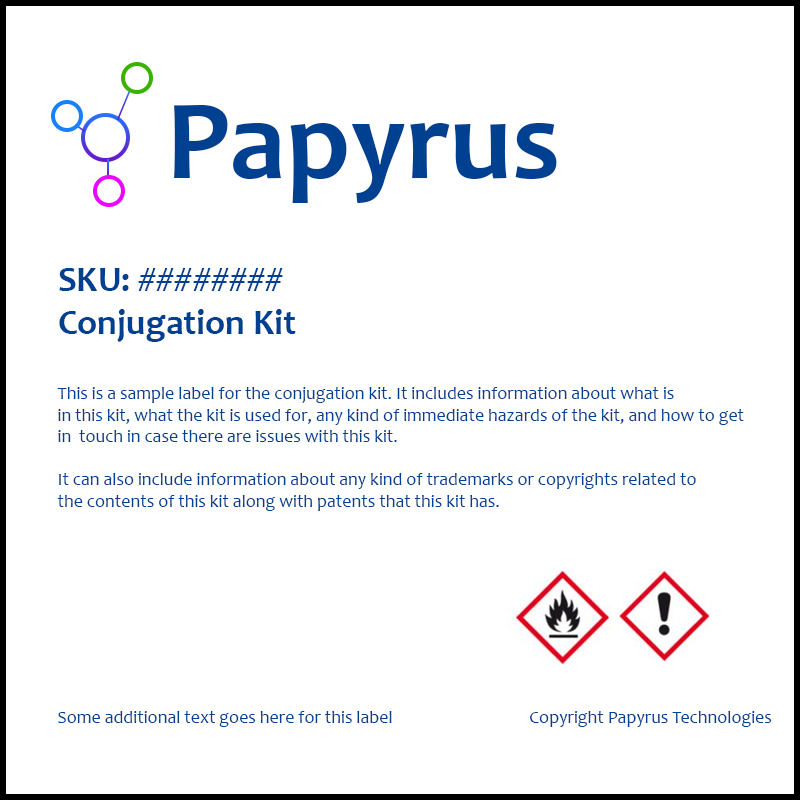
<style>
.page{position:relative;width:800px;height:800px;background:#ffffff}
.page>*{position:absolute;margin:0}
.t1{font:114.6px "Candara-Bold";color:#004090}
.t2{font:18px "Candara";color:#004090}
.t3{font:36px "Candara-Bold";color:#004090}
.t4{font:36px "Candara";color:#004090}
</style>
<div class="page">
<p class="t1" style="left:174px;top:105px;width:383px;height:98px">Papyrus</p>
<p class="t2" style="left:57px;top:268px;width:715px;height:459px"><span class="t3">SKU: </span><span class="t4">########<br></span><span class="t3">Conjugation Kit<br><br><br></span>This is a sample label for the conjugation kit. It includes information about what is<br>in this kit, what the kit is used for, any kind of immediate hazards of the kit, and how to get<br>in  touch in case there are issues with this kit. <br><br>It can also include information about any kind of trademarks or copyrights related to <br>the contents of this kit along with patents that this kit has.<br><br><br><br><br><br><br><br><br><br>Some additional text goes here for this label                                   Copyright Papyrus Technologies</p>
</div>
